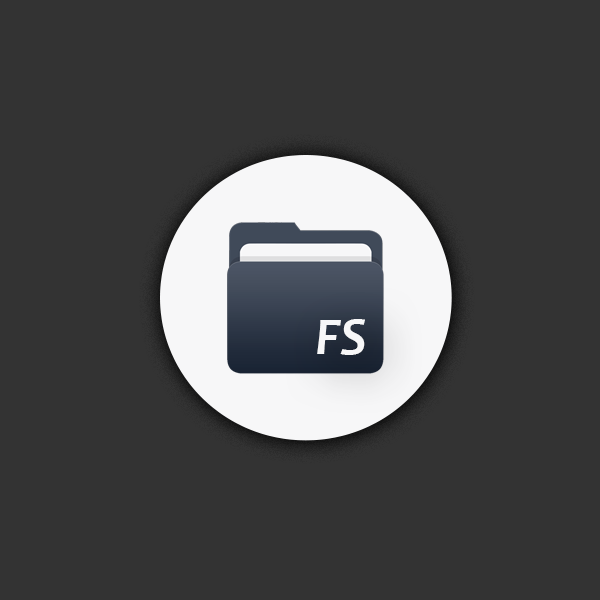
<style>
.page{position:relative;width:600px;height:600px;background:#333333}
.page>*{position:absolute;margin:0}
.t1{font:53.1px "Candara-BoldItalic";color:#f7f7f8}
</style>
<div class="page">
<p class="t1" style="left:317px;top:319px;width:48px;height:36px">FS</p>
</div>
